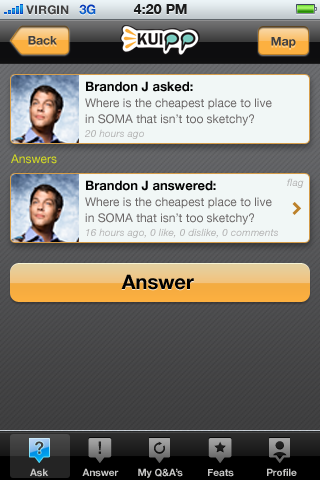
<style>
.page{position:relative;width:320px;height:480px}
.page>*{position:absolute;margin:0}
.t1{font:12px "HelveticaNeue-Bold";color:#404040;text-transform:uppercase}
.t2{font:13px "HelveticaNeue-Bold";color:#0c54c5;text-transform:uppercase}
.t3{font:14px "HelveticaNeue-Bold";color:#1a1b1b;text-transform:uppercase}
.t4{font:12px "HelveticaNeue-Bold";color:#404041}
.t5{font:12px/16px "HelveticaNeue";color:#6c6868}
.t6{font:13px/44px "HelveticaNeue-Bold";color:#040404}
.t7{font:12px/15px "HelveticaNeue";color:#6c6868}
.t8{font:10px/14px "HelveticaNeue-Italic";letter-spacing:0.01em;color:#b3b3b3}
.t9{font:12px "HelveticaNeue";color:#d7df21}
.t10{font:10px "HelveticaNeue-Italic";letter-spacing:0.01em;color:#b3b3b3}
.t11{font:20px "HelveticaNeue-Bold";color:#000000}
.t12{font:10px "HelveticaNeue-Bold";color:#c6c6c5}
</style>
<div class="page">
<p class="t1" style="left:26px;top:5px;width:43px;height:10px">VIRGIN</p>
<p class="t2" style="left:79px;top:4px;width:17px;height:11px">3G</p>
<p class="t3" style="left:133px;top:4px;width:54px;height:10px">4:20 PM</p>
<p class="t4" style="left:28px;top:36px;width:29px;height:9px">Back</p>
<p class="t4" style="left:271px;top:37px;width:25px;height:11px">Map</p>
<p class="t5" style="left:85px;top:81px;width:187px;height:58px"><span class="t6">Brandon J asked:<br></span>Where is the cheapest place to live <br>in <span class="t7">SOMA that isn’t too sketchy?<br></span><span class="t8">20 hours ago</span></p>
<p class="t9" style="left:11px;top:154px;width:46px;height:10px">Answers</p>
<p class="t8" style="left:85px;top:180px;width:193px;height:58px"><span class="t6">Brandon J answered:<br></span><span class="t5">Where is the cheapest place to live <br>in </span><span class="t7">SOMA that isn’t too sketchy?<br></span>16 hours ago, 0 like, 0 dislike, 0 comments</p>
<p class="t10" style="left:287px;top:178px;width:17px;height:10px">flag</p>
<p class="t11" style="left:121px;top:274px;width:73px;height:16px">Answer</p>
<p class="t12" style="left:30px;top:468px;width:19px;height:9px">Ask</p>
<p class="t12" style="left:82px;top:468px;width:37px;height:9px">Answer</p>
<p class="t12" style="left:138px;top:468px;width:45px;height:10px">My Q&amp;A’s</p>
<p class="t12" style="left:208px;top:469px;width:26px;height:8px">Feats</p>
<p class="t12" style="left:267px;top:468px;width:30px;height:8px">Profile</p>
</div>
